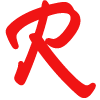
<style>
.page{position:relative;width:100px;height:100px;background:#ffffff}
.page>*{position:absolute;margin:0}
.t1{font:116.7px "Pristina-Regular";color:#f01414;font-weight:bold}
</style>
<div class="page">
<p class="t1" style="left:5px;top:0px;width:91px;height:98px">R</p>
</div>
